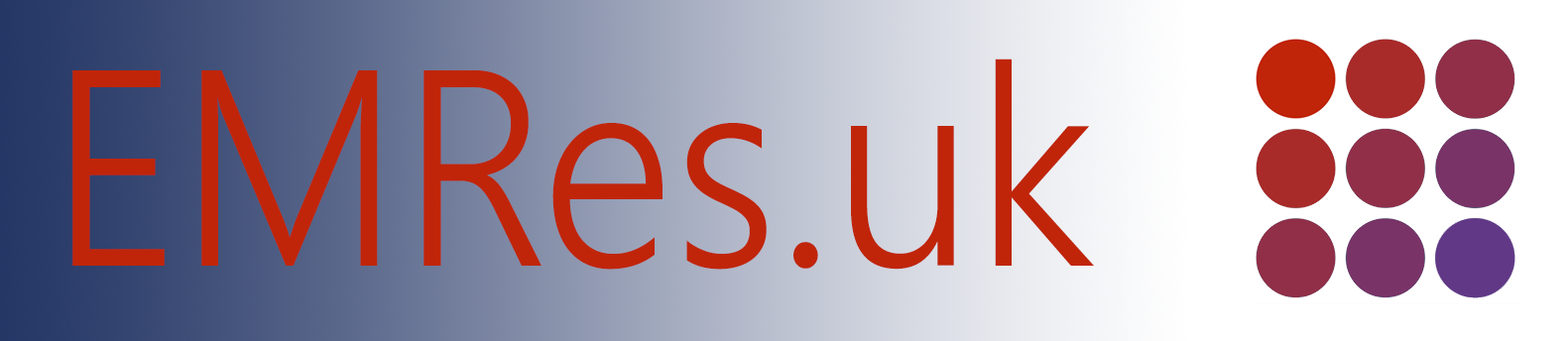
<style>
.page{position:relative;width:1568px;height:341px}
.page>*{position:absolute;margin:0}
.t1{font:278.8px "NirmalaUI-Semilight";color:#c0250a;scale:0.92 1}
</style>
<div class="page">
<p class="t1" style="left:72px;top:59px;width:1022px;height:211px">EMRes.uk</p>
</div>
